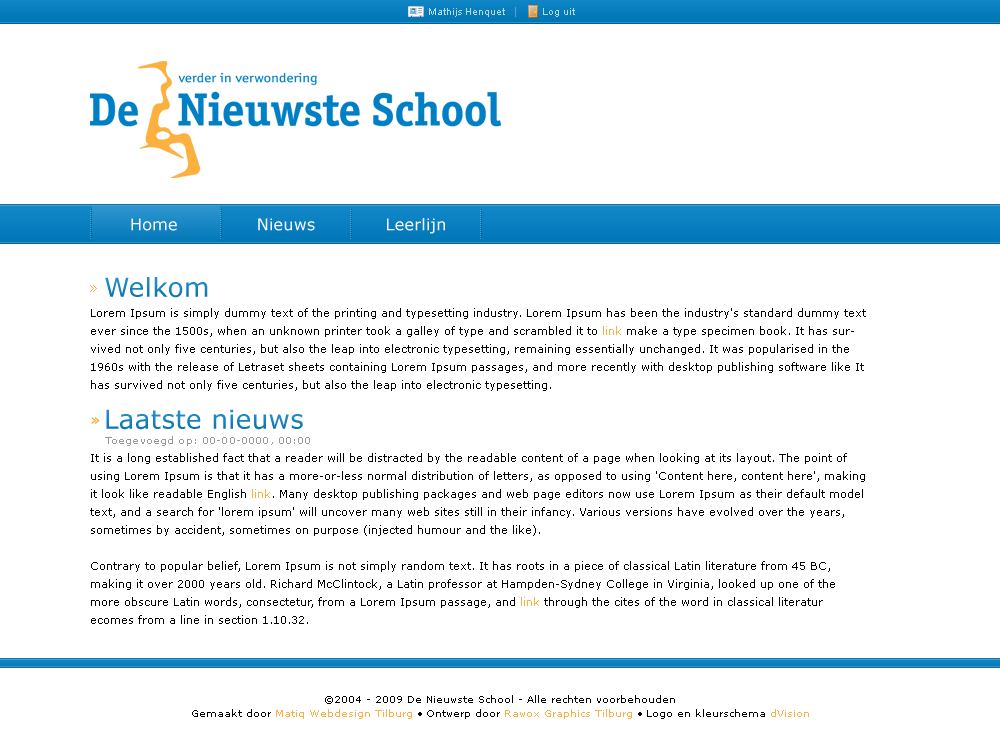
<style>
.page{position:relative;width:1000px;height:750px;background:#ffffff}
.page>*{position:absolute;margin:0}
.t1{font:10px "ArialMT";color:#b5d8eb}
.t2{font:16px "Verdana";letter-spacing:0.015em;color:#ffffff}
.t3{font:26px "Verdana";letter-spacing:0.015em;color:#0d83c4}
.t4{font:15px "Verdana";letter-spacing:0.015em;color:#fbb03f}
.t5{font:11px/18px "Verdana";color:#000000}
.t6{font:11px/18px "Verdana";color:#fbb03f}
.t7{font:10px "Verdana";letter-spacing:0.015em;color:#999999}
.t8{font:10px/14px "Verdana";color:#000000}
.t9{font:10px/14px "Verdana";color:#fbb03f}
</style>
<div class="page">
<p class="t1" style="left:429px;top:8px;width:76px;height:9px">Mathijs Henquet</p>
<p class="t1" style="left:543px;top:8px;width:32px;height:9px">Log uit</p>
<p class="t2" style="left:131px;top:218px;width:46px;height:13px">Home</p>
<p class="t2" style="left:258px;top:218px;width:57px;height:13px">Nieuws</p>
<p class="t2" style="left:387px;top:218px;width:58px;height:16px">Leerlijn</p>
<p class="t3" style="left:105px;top:277px;width:103px;height:21px">Welkom</p>
<p class="t4" style="left:90px;top:285px;width:7px;height:7px">»</p>
<p class="t5" style="left:91px;top:308px;width:775px;height:83px">Lorem Ipsum is simply dummy text of the printing and typesetting industry. Lorem Ipsum has been the industry's standard dummy text ever since the 1500s, when an unknown printer took a galley of type and scrambled it to <span class="t6">link</span> make a type specimen book. It has survived not only five centuries, but also the leap into electronic typesetting, remaining essentially unchanged. It was popularised in the 1960s with the release of Letraset sheets containing Lorem Ipsum passages, and more recently with desktop publishing software like It has survived not only five centuries, but also the leap into electronic typesetting.</p>
<p class="t3" style="left:106px;top:409px;width:197px;height:21px">Laatste nieuws</p>
<p class="t4" style="left:91px;top:417px;width:9px;height:8px">»</p>
<p class="t7" style="left:105px;top:436px;width:205px;height:10px">Toegevoegd op: 00-00-0000, 00:00</p>
<p class="t5" style="left:90px;top:453px;width:775px;height:171px">It is a long established fact that a reader will be distracted by the readable content of a page when looking at its layout. The point of using Lorem Ipsum is that it has a more-or-less normal distribution of letters, as opposed to using 'Content here, content here', making it look like readable English <span class="t6">link</span>. Many desktop publishing packages and web page editors now use Lorem Ipsum as their default model text, and a search for 'lorem ipsum' will uncover many web sites still in their infancy. Various versions have evolved over the years, sometimes by accident, sometimes on purpose (injected humour and the like).<br><br>Contrary to popular belief, Lorem Ipsum is not simply random text. It has roots in a piece of classical Latin literature from 45 BC, making it over 2000 years old. Richard McClintock, a Latin professor at Hampden-Sydney College in Virginia, looked up one of the more obscure Latin words, consectetur, from a Lorem Ipsum passage, and <span class="t6">link </span>through the cites of the word in classical literatur ecomes from a line in section 1.10.32.</p>
<p class="t8" style="left:192px;top:695px;width:617px;height:24px;text-align:center">©2004 - 2009 De Nieuwste School - Alle rechten voorbehouden<br>Gemaakt door <span class="t9">Matiq Webdesign Tilburg</span> • Ontwerp door <span class="t9">Rawox Graphics Tilburg</span> • Logo en kleurschema <span class="t9">dVision</span></p>
</div>
